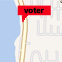
<style>
.page{position:relative;width:62px;height:62px;background:#b5ceef}
.page>*{position:absolute;margin:0}
.t1{font:8px "SegoeWP-Bold";color:#030000}
</style>
<div class="page">
<p class="t1" style="left:24px;top:7px;width:20px;height:7px">voter</p>
</div>
